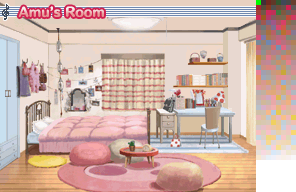
<style>
.page{position:relative;width:296px;height:192px}
.page>*{position:absolute;margin:0}
.t1{font:12px "HummingStd-E";letter-spacing:0.02em}
</style>
<div class="page">
<p class="t1" style="left:18px;top:6px;width:86px;height:12px">Amu’s Room</p>
</div>
